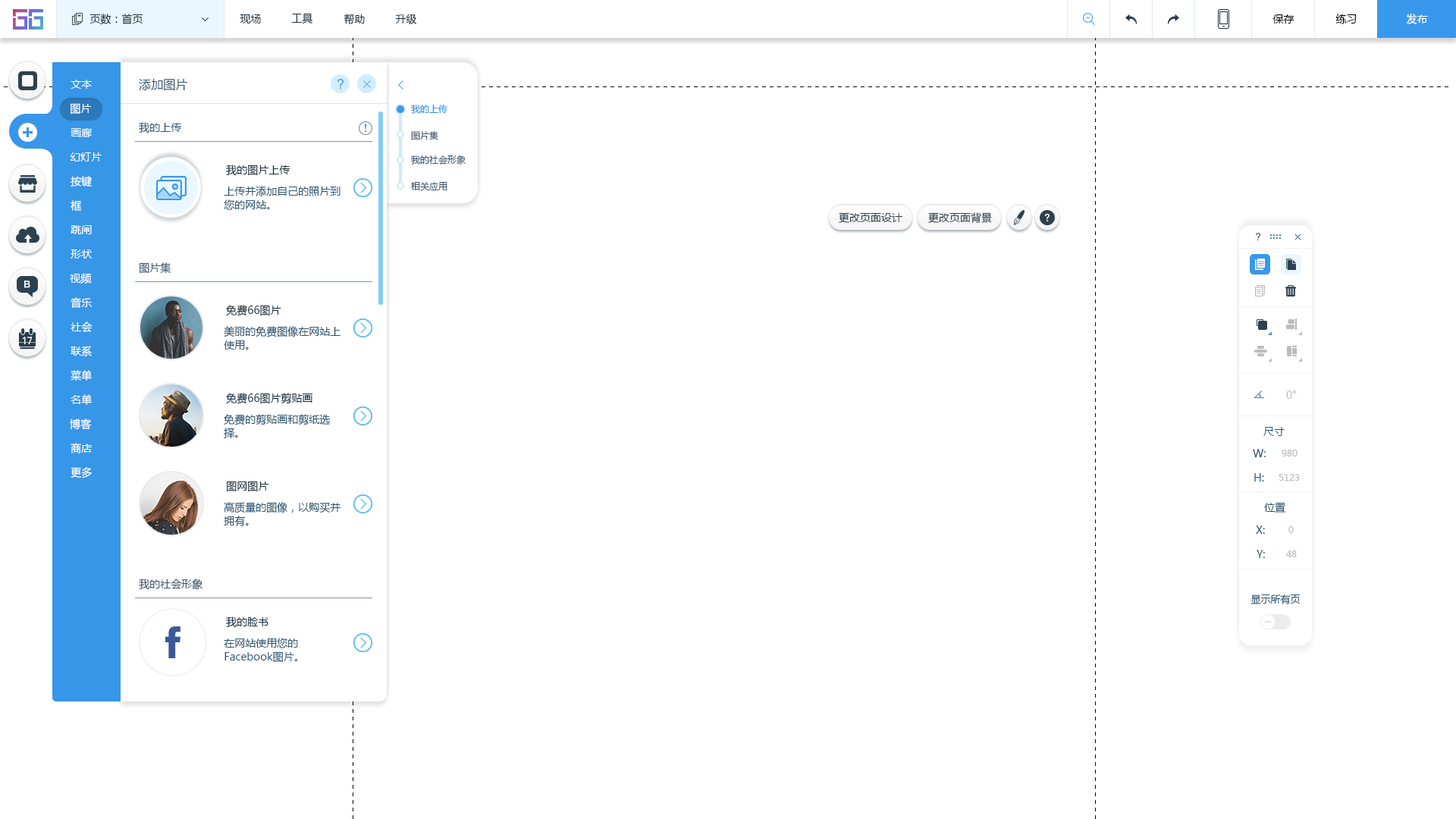
<style>
.page{position:relative;width:1456px;height:819px;background:#ffffff}
.page>*{position:absolute;margin:0}
.t1{font:10.6px "MicrosoftYaHei";color:#20303c}
.t2{font:10.6px "MicrosoftYaHei";color:#000000}
.t3{font:10.6px "MicrosoftYaHei";color:#ffffff}
.t4{font:12.1px "MicrosoftYaHei";color:#395671}
.t5{font:9.1px "MicrosoftYaHei";color:#3696e8}
.t6{font:10.6px "MicrosoftYaHei";color:#395671}
.t7{font:9.1px "MicrosoftYaHei";color:#395671}
.t8{font:10.6px "MicrosoftYaHei";color:#162d3d}
.t9{font:10.6px/13.6px "MicrosoftYaHei";color:#2b5672}
.t10{font:10.6px "MicrosoftYaHei";color:#2d4150}
.t11{font:10.6px "MicrosoftYaHei";color:#bcbcbc}
.t12{font:10.6px "MicrosoftYaHei";color:#2b5672}
.t13{font:9.1px "MicrosoftYaHei";color:#bcbcbc}
.t14{font:9.9px "MicrosoftYaHei";color:#2b5672}
</style>
<div class="page">
<p class="t1" style="left:89px;top:14px;width:54px;height:11px">页数：首页</p>
<p class="t1" style="left:240px;top:14px;width:21px;height:10px">现场</p>
<p class="t1" style="left:291px;top:13px;width:22px;height:11px">工具</p>
<p class="t1" style="left:344px;top:14px;width:21px;height:11px">帮助</p>
<p class="t1" style="left:395px;top:14px;width:22px;height:10px">升级</p>
<p class="t2" style="left:1272px;top:14px;width:22px;height:10px">保存</p>
<p class="t2" style="left:1335px;top:14px;width:22px;height:10px">练习</p>
<p class="t3" style="left:1406px;top:14px;width:22px;height:10px">发布</p>
<p class="t3" style="left:71px;top:80px;width:21px;height:9px">文本</p>
<p class="t4" style="left:139px;top:79px;width:48px;height:12px">添加图片</p>
<p class="t3" style="left:71px;top:103px;width:21px;height:12px">图片</p>
<p class="t5" style="left:411px;top:104px;width:36px;height:10px">我的上传</p>
<p class="t6" style="left:139px;top:122px;width:43px;height:11px">我的上传</p>
<p class="t3" style="left:71px;top:128px;width:22px;height:9px">画廊</p>
<p class="t7" style="left:411px;top:131px;width:27px;height:9px">图片集</p>
<p class="t3" style="left:70px;top:152px;width:32px;height:10px">幻灯片</p>
<p class="t7" style="left:411px;top:155px;width:55px;height:10px">我的社会形象</p>
<p class="t8" style="left:226px;top:165px;width:64px;height:11px">我的图片上传</p>
<p class="t3" style="left:71px;top:176px;width:21px;height:11px">按键</p>
<p class="t9" style="left:224px;top:186px;width:116px;height:24px">上传并添加自己的照片到<br>您的网站。</p>
<p class="t7" style="left:411px;top:182px;width:36px;height:9px">相关应用</p>
<p class="t3" style="left:71px;top:200px;width:11px;height:11px">框</p>
<p class="t10" style="left:839px;top:212px;width:63px;height:11px">更改页面设计</p>
<p class="t10" style="left:928px;top:212px;width:64px;height:11px">更改页面背景</p>
<p class="t3" style="left:71px;top:225px;width:21px;height:9px">跳闸</p>
<p class="t3" style="left:71px;top:249px;width:22px;height:10px">形状</p>
<p class="t6" style="left:140px;top:262px;width:31px;height:12px">图片集</p>
<p class="t3" style="left:70px;top:273px;width:22px;height:11px">视频</p>
<p class="t3" style="left:71px;top:297px;width:21px;height:11px">音乐</p>
<p class="t8" style="left:226px;top:305px;width:55px;height:11px">免费66图片</p>
<p class="t3" style="left:71px;top:322px;width:22px;height:10px">社会</p>
<p class="t9" style="left:224px;top:326px;width:116px;height:24px">美丽的免费图像在网站上<br>使用。</p>
<p class="t3" style="left:71px;top:346px;width:21px;height:10px">联系</p>
<p class="t3" style="left:71px;top:370px;width:21px;height:11px">菜单</p>
<p class="t3" style="left:71px;top:394px;width:21px;height:11px">名单</p>
<p class="t8" style="left:226px;top:393px;width:87px;height:11px">免费66图片剪贴画</p>
<p class="t11" style="left:1286px;top:391px;width:11px;height:8px">0°</p>
<p class="t3" style="left:70px;top:419px;width:22px;height:11px">博客</p>
<p class="t9" style="left:224px;top:414px;width:106px;height:24px">免费的剪贴画和剪纸选<br>择。</p>
<p class="t12" style="left:1263px;top:427px;width:22px;height:9px">尺寸</p>
<p class="t3" style="left:71px;top:443px;width:22px;height:10px">商店</p>
<p class="t12" style="left:1253px;top:449px;width:13px;height:8px">W:</p>
<p class="t13" style="left:1282px;top:450px;width:15px;height:7px">980</p>
<p class="t3" style="left:71px;top:467px;width:21px;height:12px">更多</p>
<p class="t12" style="left:1254px;top:473px;width:10px;height:9px">H:</p>
<p class="t13" style="left:1279px;top:474px;width:21px;height:7px">5123</p>
<p class="t8" style="left:227px;top:481px;width:42px;height:11px">图网图片</p>
<p class="t9" style="left:224px;top:502px;width:117px;height:25px">高质量的图像，以购买并<br>拥有。</p>
<p class="t12" style="left:1264px;top:502px;width:22px;height:11px">位置</p>
<p class="t12" style="left:1256px;top:526px;width:9px;height:8px">X:</p>
<p class="t13" style="left:1288px;top:526px;width:6px;height:7px">0</p>
<p class="t12" style="left:1257px;top:550px;width:8px;height:8px">Y:</p>
<p class="t13" style="left:1286px;top:551px;width:11px;height:6px">48</p>
<p class="t6" style="left:139px;top:579px;width:63px;height:11px">我的社会形象</p>
<p class="t14" style="left:1250px;top:594px;width:51px;height:10px">显示所有页</p>
<p class="t8" style="left:226px;top:617px;width:42px;height:11px">我的脸书</p>
<p class="t9" style="left:224px;top:638px;width:74px;height:25px">在网站使用您的<br>Facebook图片。</p>
</div>
